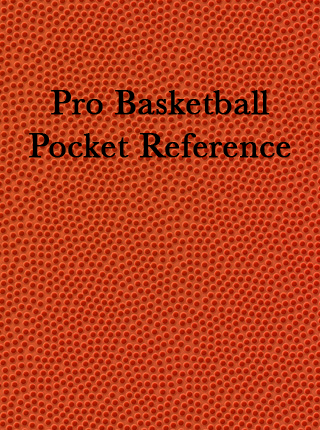
<style>
.page{position:relative;width:320px;height:430px}
.page>*{position:absolute;margin:0}
.t1{font:36px "Baskerville";color:#000000;font-weight:bold}
</style>
<div class="page">
<p class="t1" style="left:29px;top:90px;width:262px;height:68px;text-align:center">Pro Basketball <br>Pocket Reference</p>
</div>
